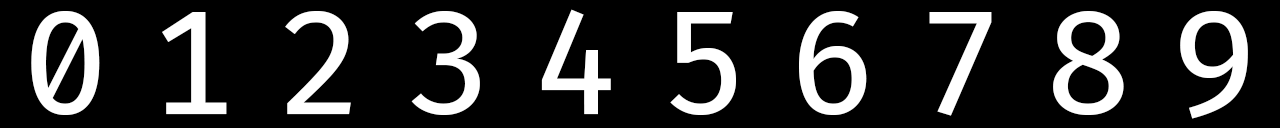
<style>
.page{position:relative;width:1280px;height:128px;background:#000000}
.page>*{position:absolute;margin:0}
.t1{font:144px "FiraCode-Retina";letter-spacing:0.272em;color:#ffffff}
</style>
<div class="page">
<p class="t1" style="left:31px;top:9px;width:1217px;height:110px">0123456789</p>
</div>
